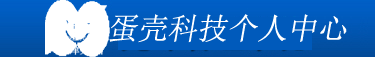
<style>
.page{position:relative;width:375px;height:57px;background:#005abb}
.page>*{position:absolute;margin:0}
.t1{font:30px "NSimSun";color:#ffffff;font-style:italic}
</style>
<div class="page">
<p class="t1" style="left:109px;top:14px;width:238px;height:29px">蛋壳科技个人中心</p>
</div>
